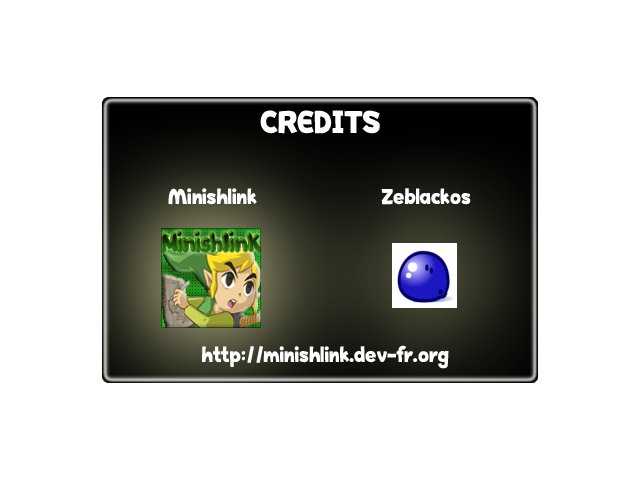
<style>
.page{position:relative;width:640px;height:480px;background:#ffffff}
.page>*{position:absolute;margin:0}
.t1{font:35px "HappyHell";color:#ffffff}
.t2{font:24px "HappyHell";color:#ffffff}
</style>
<div class="page">
<p class="t1" style="left:260px;top:110px;width:120px;height:24px">CREDITS</p>
<p class="t2" style="left:168px;top:188px;width:89px;height:17px">Minishlink</p>
<p class="t2" style="left:381px;top:188px;width:90px;height:17px">Zeblackos</p>
<p class="t2" style="left:202px;top:345px;width:247px;height:24px">http://minishlink.dev-fr.org</p>
</div>
